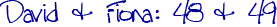
<style>
.page{position:relative;width:277px;height:27px;background:#ffffff}
.page>*{position:absolute;margin:0}
.t1{font:36px "TallPaul";color:#000099}
</style>
<div class="page">
<p class="t1" style="left:0px;top:0px;width:277px;height:24px">David &amp; Fiona: 48 &amp; 49</p>
</div>
